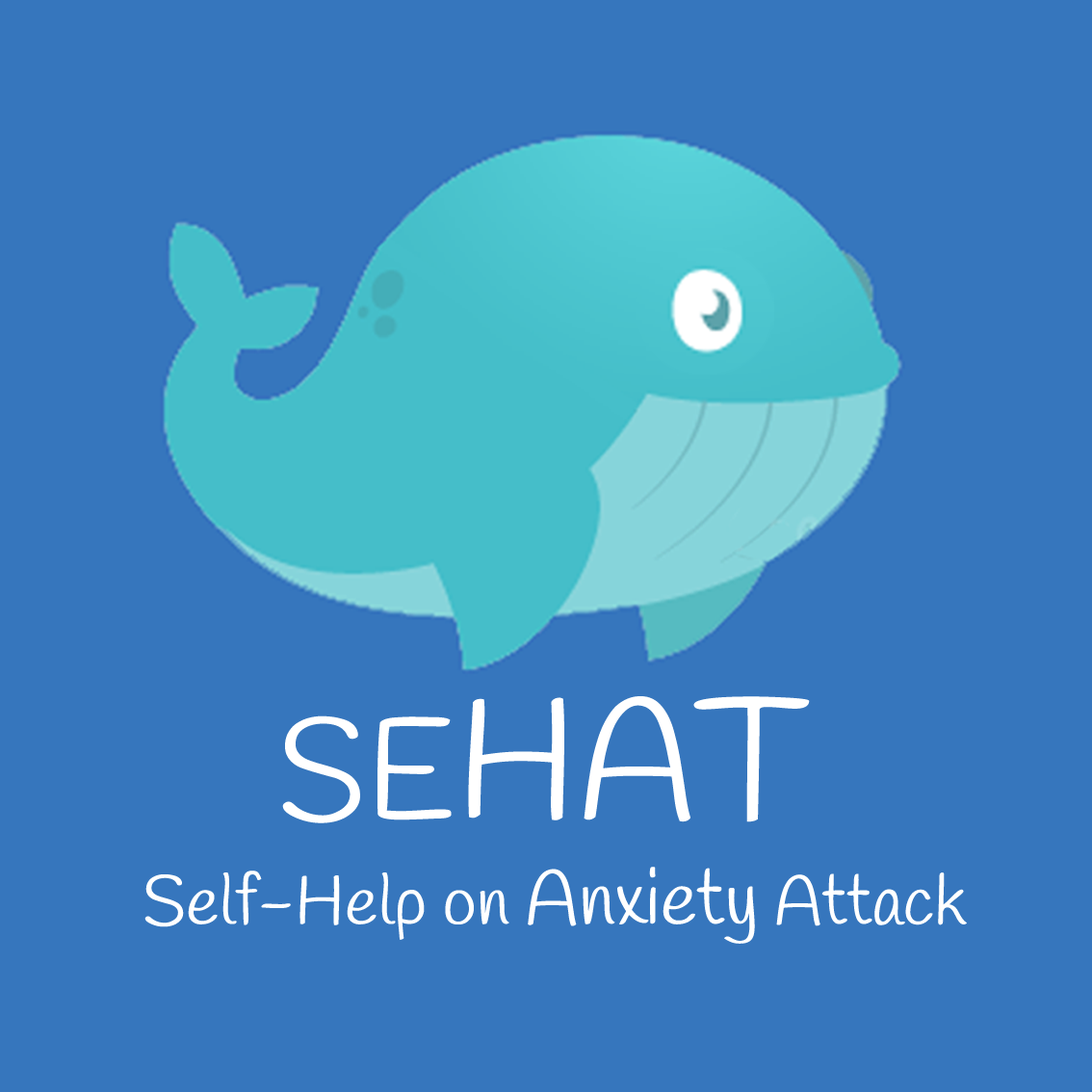
<style>
.page{position:relative;width:1092px;height:1092px;background:#3676bd}
.page>*{position:absolute;margin:0}
.t1{font:170.5px "Handlee-Regular";color:#ffffff}
.t2{font:141.6px "Handlee-Regular";color:#ffffff}
.t3{font:69.3px "Handlee-Regular";color:#ffffff}
.t4{font:77px "Handlee-Regular";color:#ffffff}
</style>
<div class="page">
<p class="t1" style="left:282px;top:696px;width:528px;height:127px"><span class="t2">SE</span>HAT</p>
<p class="t3" style="left:144px;top:867px;width:823px;height:77px">Self-Help on <span class="t4">Anxiety</span> Attack</p>
</div>
